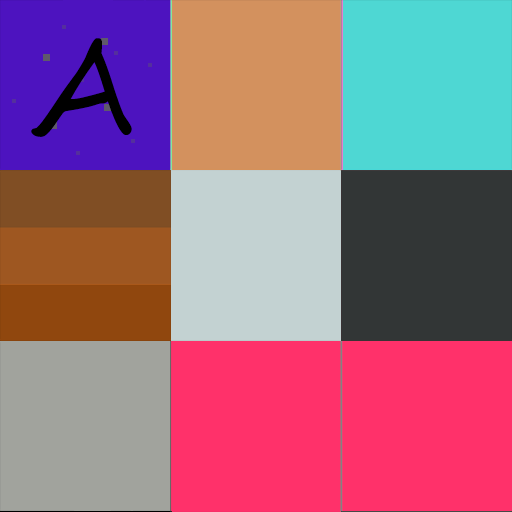
<style>
.page{position:relative;width:512px;height:512px;background:#ff316a}
.page>*{position:absolute;margin:0}
.t1{font:128.9px "SegoeScript";color:#000000;scale:0.97 1}
</style>
<div class="page">
<p class="t1" style="left:31px;top:38px;width:101px;height:99px">A</p>
</div>
